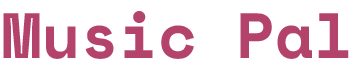
<style>
.page{position:relative;width:350px;height:75px;background:#ffffff}
.page>*{position:absolute;margin:0}
.t1{font:63.7px "SpaceMono-Bold";color:#b4436c}
</style>
<div class="page">
<p class="t1" style="left:3px;top:11px;width:346px;height:48px">Music Pal</p>
</div>
